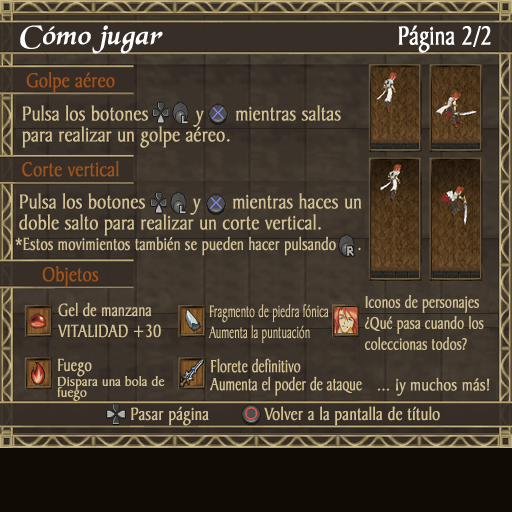
<style>
.page{position:relative;width:512px;height:512px}
.page>*{position:absolute;margin:0}
.t1{font:27.9px "BlackChancery";color:#ffffff;font-weight:bold;font-style:italic;scale:1.06 1}
.t2{font:27.6px "BakerSignetBT-Roman";color:#ffffff;font-weight:bold;scale:0.8 1}
.t3{font:21.3px/21px "BakerSignetBT-Roman";color:#d2c294;font-weight:bold;scale:0.86 1}
.t4{font:18.6px "BakerSignetBT-Roman";color:#d2c294;font-weight:bold;scale:0.79 1}
.t5{font:18.6px/21px "BakerSignetBT-Roman";color:#d2c294;font-weight:bold;scale:0.79 1}
.t6{font:17.7px/21px "BakerSignetBT-Roman";color:#d2c294;font-weight:bold;scale:0.63 1}
.t7{font:17.7px/21px "BakerSignetBT-Roman";color:#d2c294;font-weight:bold;scale:0.78 1}
.t8{font:13.8px/15px "BakerSignetBT-Roman";color:#d2c294;font-weight:bold}
.t9{font:13.8px/11px "BakerSignetBT-Roman";color:#d2c294;font-weight:bold}
.t10{font:18.9px/18px "BakerSignetBT-Roman";color:#d2c294;font-weight:bold;scale:0.71 1}
.t11{font:17.7px "BakerSignetBT-Roman";color:#d2c294;font-weight:bold;scale:0.88 1}
.t12{font:18.9px "BakerSignetBT-Roman";color:#d2c294;font-weight:bold;scale:0.84 1}
</style>
<div class="page">
<p class="t1" style="left:20px;top:25px;width:143px;height:29px">Cómo jugar</p>
<p class="t2" style="left:398px;top:25px;width:93px;height:28px">Página 2/2</p>
<p class="t3" style="left:22px;top:105px;width:319px;height:43px">Pulsa los botones         y      mientras saltas<br>para realizar un golpe aéreo.</p>
<p class="t3" style="left:19px;top:193px;width:343px;height:43px">Pulsa los botones         y      mientras haces un<br>doble salto para realizar un corte vertical.</p>
<p class="t4" style="left:15px;top:236px;width:346px;height:20px">*Estos movimientos también se pueden hacer pulsando     .</p>
<p class="t5" style="left:58px;top:302px;width:103px;height:36px">Gel de manzana<br>VITALIDAD +30</p>
<p class="t6" style="left:208px;top:304px;width:121px;height:39px">Fragmento de piedra fónica<br>Aumenta la puntuación</p>
<p class="t7" style="left:365px;top:295px;width:119px;height:55px">Iconos de personajes<br>¿Qué pasa cuando los<br>coleccionas todos?</p>
<p class="t8" style="left:57px;top:358px;width:108px;height:43px"><span class="t5">Fuego<br></span>Dispara una bola de<br><span class="t9">fuego</span></p>
<p class="t10" style="left:209px;top:358px;width:153px;height:38px">Florete definitivo<br>Aumenta el poder de ataque</p>
<p class="t11" style="left:377px;top:377px;width:113px;height:19px">... ¡y muchos más!</p>
<p class="t12" style="left:131px;top:406px;width:309px;height:20px">Pasar página            Volver a la pantalla de título</p>
</div>
